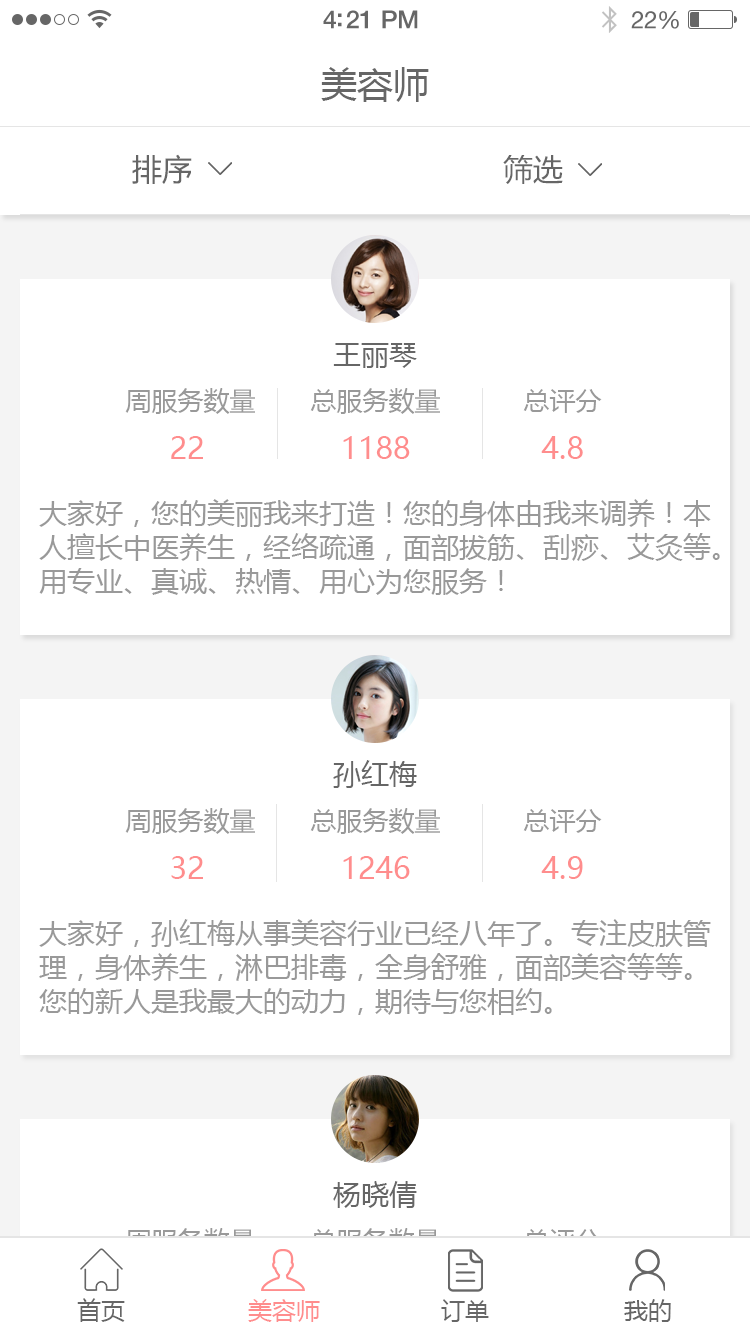
<style>
.page{position:relative;width:750px;height:1334px;background:#ffffff}
.page>*{position:absolute;margin:0}
.t1{font:25px "HelveticaNeue-Medium";letter-spacing:-0.02em;color:#666666}
.t2{font:24px "HelveticaNeue";letter-spacing:-0.02em;color:#666666}
.t3{font:36px "MicrosoftYaHei";color:#666666}
.t4{font:30px "MicrosoftYaHei";color:#666666}
.t5{font:28px "MicrosoftYaHei";color:#666666}
.t6{font:26px "MicrosoftYaHei";color:#999999}
.t7{font:30px "MicrosoftYaHei";color:#ff8d8d}
.t8{font:28px/34px "MicrosoftYaHei";color:#999999}
.t9{font:26px "MicrosoftYaHei"}
.t10{font:24px "MicrosoftYaHei";color:#666666}
.t11{font:24px "MicrosoftYaHei";color:#ff8d8d}
</style>
<div class="page">
<p class="t1" style="left:323px;top:10px;width:95px;height:19px">4:21 PM</p>
<p class="t2" style="left:631px;top:11px;width:48px;height:18px">22%</p>
<p class="t3" style="left:321px;top:67px;width:108px;height:35px">美容师</p>
<p class="t4" style="left:132px;top:154px;width:60px;height:30px">排序</p>
<p class="t4" style="left:503px;top:155px;width:60px;height:29px">筛选</p>
<p class="t5" style="left:333px;top:343px;width:84px;height:25px">王丽琴</p>
<p class="t6" style="left:125px;top:388px;width:130px;height:26px">周服务数量</p>
<p class="t6" style="left:310px;top:388px;width:130px;height:26px">总服务数量</p>
<p class="t6" style="left:523px;top:389px;width:79px;height:24px">总评分</p>
<p class="t7" style="left:171px;top:436px;width:32px;height:23px">22</p>
<p class="t7" style="left:343px;top:436px;width:67px;height:23px">1188</p>
<p class="t7" style="left:541px;top:436px;width:42px;height:23px">4.8</p>
<p class="t8" style="left:39px;top:499px;width:681px;height:96px">大家好，您的美丽我来打造！您的身体由我来调养！本<br>人擅长中医养生，经络疏通，面部拔筋、刮痧、艾灸等。<br>用专业、真诚、热情、用心为您服务！</p>
<p class="t5" style="left:333px;top:760px;width:84px;height:28px">孙红梅</p>
<p class="t6" style="left:125px;top:808px;width:130px;height:26px">周服务数量</p>
<p class="t6" style="left:310px;top:808px;width:130px;height:26px">总服务数量</p>
<p class="t6" style="left:523px;top:809px;width:79px;height:24px">总评分</p>
<p class="t7" style="left:171px;top:856px;width:32px;height:23px">32</p>
<p class="t7" style="left:343px;top:856px;width:67px;height:23px">1246</p>
<p class="t7" style="left:541px;top:856px;width:42px;height:23px">4.9</p>
<p class="t8" style="left:39px;top:919px;width:672px;height:96px">大家好，孙红梅从事美容行业已经八年了。专注皮肤管<br>理，身体养生，淋巴排毒，全身舒雅，面部美容等等。<br>您的新人是我最大的动力，期待与您相约。</p>
<p class="t5" style="left:333px;top:1181px;width:84px;height:27px">杨晓倩</p>
<p class="t9" style="left:125px;top:1228px;width:130px;height:26px">周服务数量</p>
<p class="t9" style="left:310px;top:1228px;width:130px;height:26px">总服务数量</p>
<p class="t9" style="left:523px;top:1229px;width:79px;height:24px">总评分</p>
<p class="t10" style="left:77px;top:1298px;width:48px;height:24px">首页</p>
<p class="t11" style="left:248px;top:1299px;width:72px;height:23px">美容师</p>
<p class="t10" style="left:441px;top:1299px;width:48px;height:23px">订单</p>
<p class="t10" style="left:624px;top:1299px;width:47px;height:23px">我的</p>
</div>
